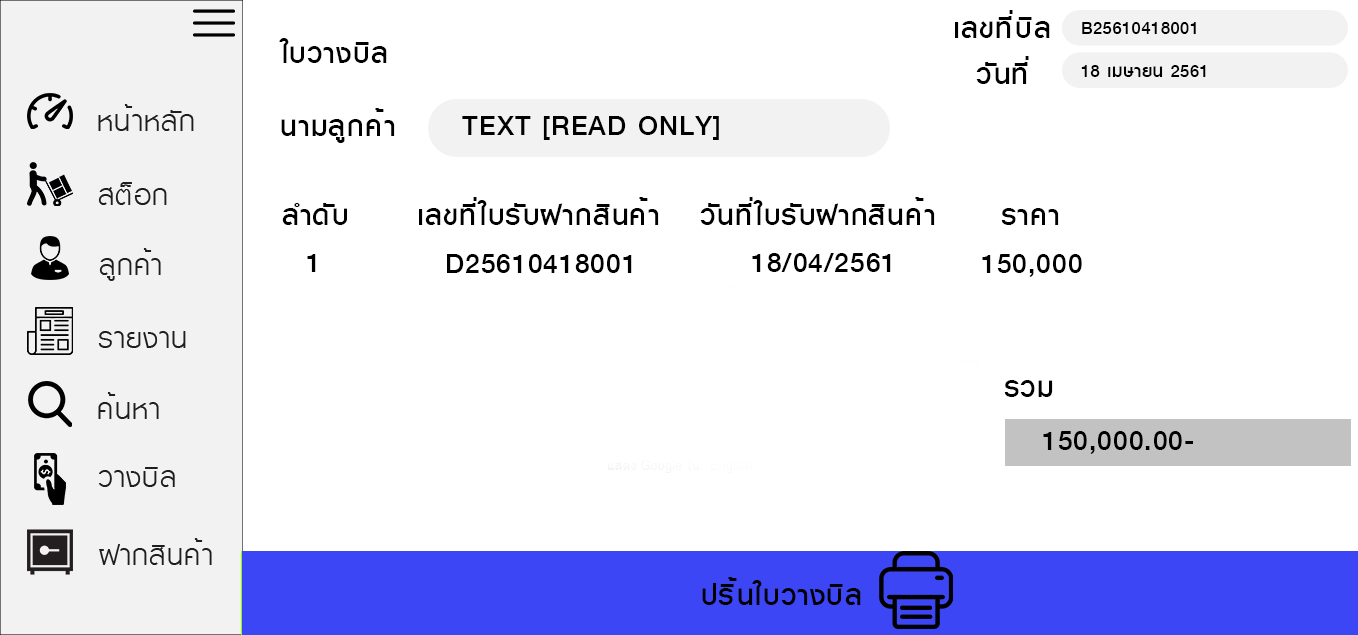
<style>
.page{position:relative;width:1358px;height:635px;background:#ffffff}
.page>*{position:absolute;margin:0}
.t1{font:40px "KittithadaMedium65P";letter-spacing:0.025em;color:#000000}
.t2{font:24.6px "KittithadaMedium65P";letter-spacing:0.025em;color:#000000}
</style>
<div class="page">
<p class="t1" style="left:955px;top:10px;width:95px;height:28px">เลขที่บิล</p>
<p class="t2" style="left:1082px;top:22px;width:114px;height:12px">B25610418001</p>
<p class="t1" style="left:279px;top:38px;width:108px;height:25px">ใบวางบิล</p>
<p class="t1" style="left:976px;top:56px;width:53px;height:28px">วันที่</p>
<p class="t2" style="left:1081px;top:65px;width:125px;height:12px">18 เมษายน 2561</p>
<p class="t1" style="left:281px;top:108px;width:114px;height:35px">นามลูกค้า</p>
<p class="t1" style="left:462px;top:116px;width:257px;height:24px">TEXT [READ ONLY]</p>
<p class="t1" style="left:419px;top:197px;width:240px;height:28px">เลขที่ใบรับฝากสินค้า</p>
<p class="t1" style="left:700px;top:197px;width:235px;height:28px">วันที่ใบรับฝากสินค้า</p>
<p class="t1" style="left:282px;top:203px;width:65px;height:22px">ลำดับ</p>
<p class="t1" style="left:1001px;top:208px;width:58px;height:17px">ราคา</p>
<p class="t1" style="left:307px;top:254px;width:9px;height:18px">1</p>
<p class="t1" style="left:447px;top:254px;width:185px;height:19px">D25610418001</p>
<p class="t1" style="left:752px;top:253px;width:139px;height:19px">18/04/2561</p>
<p class="t1" style="left:982px;top:254px;width:100px;height:23px">150,000</p>
<p class="t1" style="left:1004px;top:380px;width:49px;height:17px">รวม</p>
<p class="t1" style="left:1043px;top:431px;width:150px;height:23px">150,000.00-</p>
<p class="t1" style="left:702px;top:577px;width:159px;height:28px">ปริ้นใบวางบิล</p>
</div>
